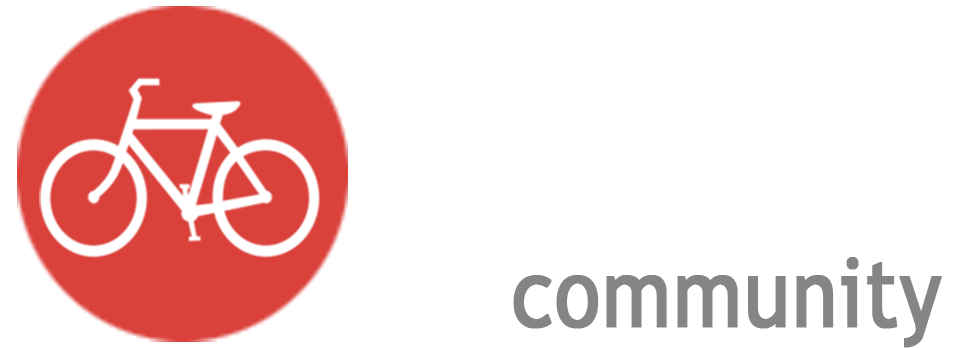
<style>
.page{position:relative;width:958px;height:348px;background:#ffffff}
.page>*{position:absolute;margin:0}
.t1{font:96.3px "TrebuchetMS";color:#868585;font-weight:bold;scale:0.86 1}
</style>
<div class="page">
<p class="t1" style="left:513px;top:257px;width:429px;height:91px">community</p>
</div>
